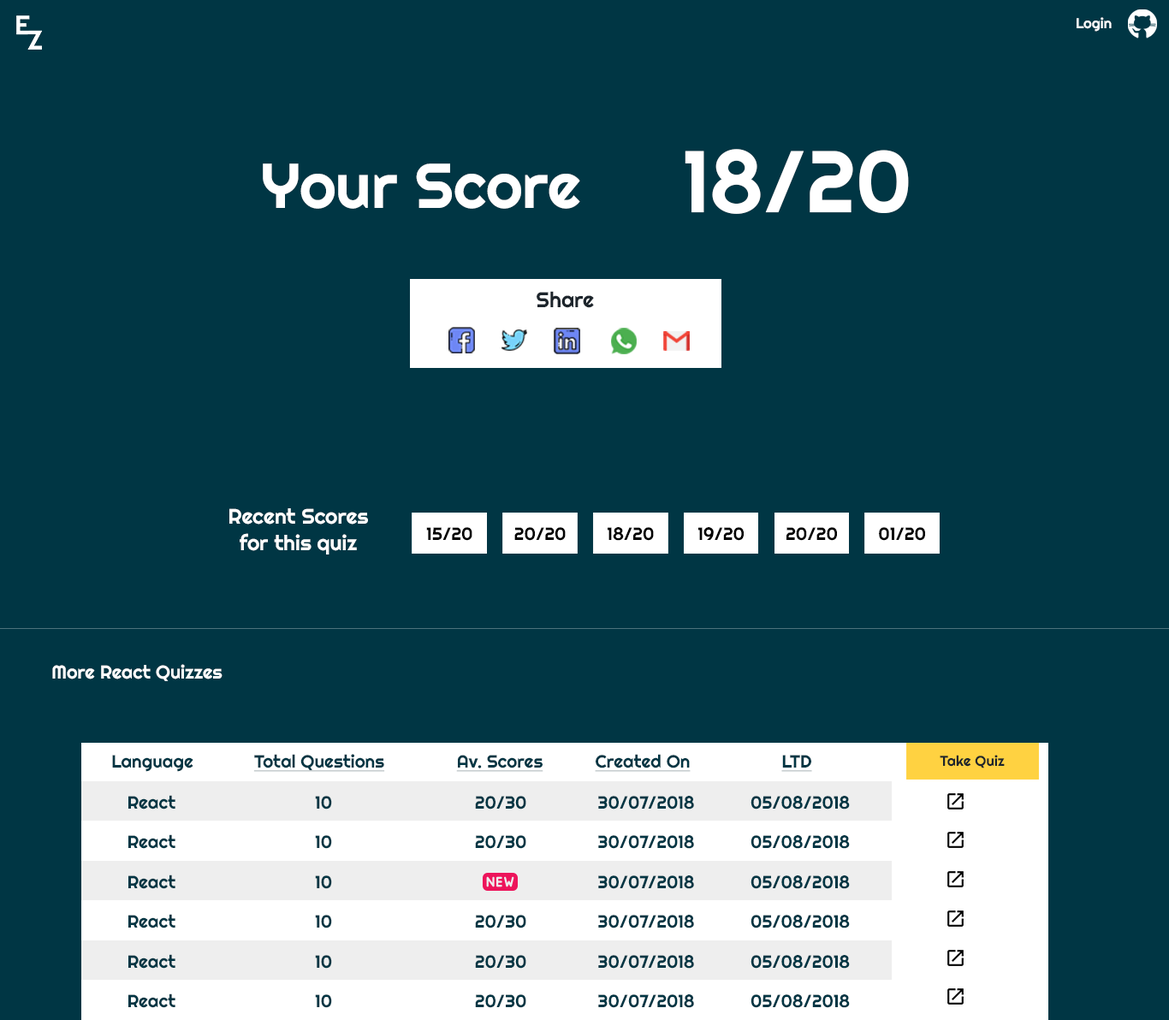
<style>
.page{position:relative;width:1169px;height:1020px;background:#003644}
.page>*{position:absolute;margin:0}
.t1{font:14.3px "Righteous-Regular";color:#ffffff}
.t2{font:87px "Righteous-Regular";color:#ffffff}
.t3{font:63px "Righteous-Regular";color:#ffffff}
.t4{font:21.3px "Righteous-Regular";color:#1d252c}
.t5{font:21px/26.3px "Righteous-Regular";color:#ffffff}
.t6{font:17.8px "Righteous-Regular";color:#000000}
.t7{font:18.5px "Righteous-Regular";color:#ffffff}
.t8{font:17.7px "Righteous-Regular";color:#003644}
.t9{font:17.7px "Righteous-Regular";color:#003644;text-decoration:underline}
.t10{font:14.4px "Righteous-Regular";color:#1d252c}
</style>
<div class="page">
<p class="t1" style="left:1077px;top:17px;width:35px;height:15px">Login</p>
<p class="t2" style="left:685px;top:149px;width:224px;height:65px">18/20</p>
<p class="t3" style="left:263px;top:163px;width:317px;height:46px">Your Score</p>
<p class="t4" style="left:537px;top:291px;width:57px;height:17px">Share</p>
<p class="t5" style="left:229px;top:508px;width:139px;height:47px;text-align:center">Recent Scores<br>for this quiz</p>
<p class="t6" style="left:426px;top:527px;width:46px;height:14px">15/20</p>
<p class="t6" style="left:514px;top:527px;width:52px;height:14px">20/20</p>
<p class="t6" style="left:608px;top:527px;width:46px;height:14px">18/20</p>
<p class="t6" style="left:698px;top:527px;width:46px;height:14px">19/20</p>
<p class="t6" style="left:786px;top:527px;width:51px;height:14px">20/20</p>
<p class="t6" style="left:879px;top:527px;width:46px;height:14px">01/20</p>
<p class="t7" style="left:52px;top:664px;width:170px;height:17px">More React Quizzes</p>
<p class="t8" style="left:112px;top:755px;width:81px;height:17px">Language</p>
<p class="t9" style="left:253px;top:754px;width:132px;height:18px">Total Questions</p>
<p class="t9" style="left:456px;top:755px;width:87px;height:17px">Av. Scores</p>
<p class="t9" style="left:595px;top:754px;width:96px;height:18px">Created On</p>
<p class="t9" style="left:781px;top:755px;width:31px;height:17px">LTD</p>
<p class="t10" style="left:940px;top:755px;width:65px;height:13px">Take Quiz</p>
<p class="t8" style="left:128px;top:795px;width:47px;height:15px">React</p>
<p class="t8" style="left:315px;top:796px;width:17px;height:14px">10</p>
<p class="t8" style="left:475px;top:796px;width:51px;height:14px">20/30</p>
<p class="t8" style="left:598px;top:796px;width:96px;height:14px">30/07/2018</p>
<p class="t8" style="left:751px;top:796px;width:99px;height:14px">05/08/2018</p>
<p class="t8" style="left:128px;top:834px;width:47px;height:15px">React</p>
<p class="t8" style="left:315px;top:835px;width:17px;height:14px">10</p>
<p class="t8" style="left:475px;top:835px;width:51px;height:14px">20/30</p>
<p class="t8" style="left:598px;top:835px;width:96px;height:14px">30/07/2018</p>
<p class="t8" style="left:751px;top:835px;width:99px;height:14px">05/08/2018</p>
<p class="t8" style="left:128px;top:875px;width:47px;height:14px">React</p>
<p class="t8" style="left:315px;top:875px;width:17px;height:14px">10</p>
<p class="t8" style="left:598px;top:875px;width:96px;height:14px">30/07/2018</p>
<p class="t8" style="left:751px;top:875px;width:99px;height:14px">05/08/2018</p>
<p class="t8" style="left:128px;top:914px;width:47px;height:15px">React</p>
<p class="t8" style="left:315px;top:915px;width:17px;height:14px">10</p>
<p class="t8" style="left:475px;top:915px;width:51px;height:14px">20/30</p>
<p class="t8" style="left:598px;top:915px;width:96px;height:14px">30/07/2018</p>
<p class="t8" style="left:751px;top:915px;width:99px;height:14px">05/08/2018</p>
<p class="t8" style="left:128px;top:954px;width:47px;height:15px">React</p>
<p class="t8" style="left:315px;top:955px;width:17px;height:14px">10</p>
<p class="t8" style="left:475px;top:955px;width:51px;height:14px">20/30</p>
<p class="t8" style="left:598px;top:955px;width:96px;height:14px">30/07/2018</p>
<p class="t8" style="left:751px;top:955px;width:99px;height:14px">05/08/2018</p>
<p class="t8" style="left:128px;top:994px;width:47px;height:14px">React</p>
<p class="t8" style="left:315px;top:994px;width:17px;height:14px">10</p>
<p class="t8" style="left:475px;top:994px;width:51px;height:14px">20/30</p>
<p class="t8" style="left:598px;top:994px;width:96px;height:14px">30/07/2018</p>
<p class="t8" style="left:751px;top:994px;width:99px;height:14px">05/08/2018</p>
</div>
